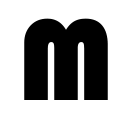
<style>
.page{position:relative;width:128px;height:128px;background:#ffffff}
.page>*{position:absolute;margin:0}
.t1{font:119.1px "STHupo";color:#000000}
</style>
<div class="page">
<p class="t1" style="left:24px;top:18px;width:84px;height:82px">M</p>
</div>
